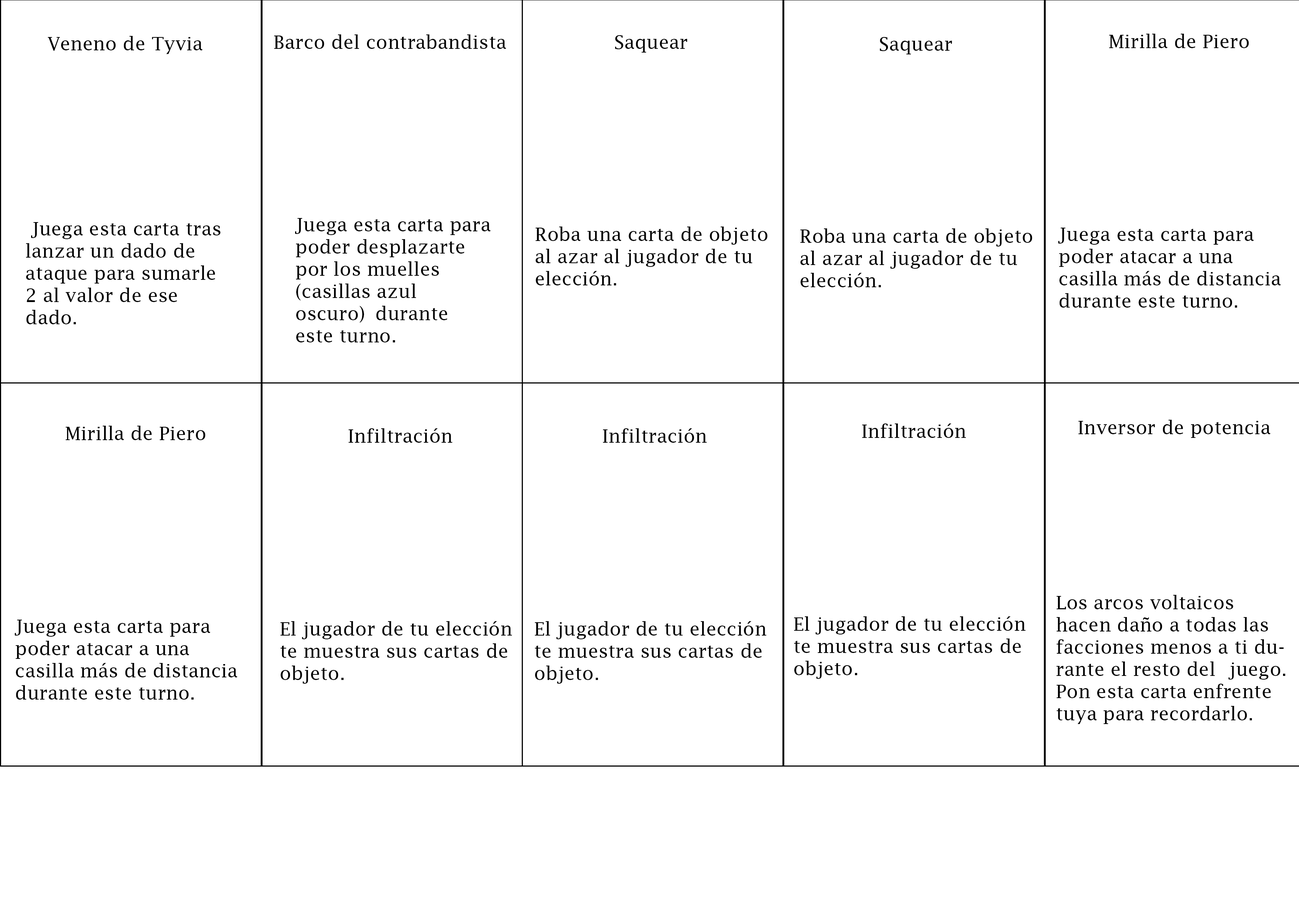
<style>
.page{position:relative;width:1299px;height:918px;background:#ffffff}
.page>*{position:absolute;margin:0}
.t1{font:18.5px "LucidaFax";color:#000000}
</style>
<div class="page">
<p class="t1" style="left:48px;top:36px;width:155px;height:18px">Veneno de Tyvia</p>
<p class="t1" style="left:274px;top:34px;width:232px;height:15px">Barco del contrabandista</p>
<p class="t1" style="left:615px;top:35px;width:72px;height:18px">Saquear</p>
<p class="t1" style="left:880px;top:37px;width:72px;height:17px">Saquear</p>
<p class="t1" style="left:1109px;top:34px;width:140px;height:14px">Mirilla de Piero</p>
<p class="t1" style="left:295px;top:218px;width:196px;height:124px">Juega esta carta para poder desplazarte por los muelles (casillas azul oscuro)  durante este turno.</p>
<p class="t1" style="left:26px;top:222px;width:195px;height:102px">Juega esta carta tras lanzar un dado de ataque para sumarle 2 al valor de ese dado.</p>
<p class="t1" style="left:535px;top:227px;width:232px;height:58px">Roba una carta de objeto al azar al jugador de tu elección.</p>
<p class="t1" style="left:800px;top:228px;width:232px;height:59px">Roba una carta de objeto al azar al jugador de tu elección.</p>
<p class="t1" style="left:1058px;top:228px;width:223px;height:80px">Juega esta carta para poder atacar a una<br>casilla más de distancia durante este turno.</p>
<p class="t1" style="left:66px;top:426px;width:139px;height:14px">Mirilla de Piero</p>
<p class="t1" style="left:862px;top:424px;width:104px;height:14px">Infiltración</p>
<p class="t1" style="left:1078px;top:420px;width:192px;height:18px">Inversor de potencia</p>
<p class="t1" style="left:348px;top:428px;width:104px;height:15px">Infiltración</p>
<p class="t1" style="left:603px;top:428px;width:104px;height:15px">Infiltración</p>
<p class="t1" style="left:1056px;top:595px;width:229px;height:129px">Los arcos voltaicos hacen daño a todas las facciones menos a ti durante el resto del  juego. Pon esta carta enfrente tuya para recordarlo.</p>
<p class="t1" style="left:794px;top:616px;width:232px;height:63px">El jugador de tu elección te muestra sus cartas de objeto.</p>
<p class="t1" style="left:15px;top:620px;width:222px;height:80px">Juega esta carta para poder atacar a una<br>casilla más de distancia durante este turno.</p>
<p class="t1" style="left:280px;top:621px;width:232px;height:63px">El jugador de tu elección te muestra sus cartas de objeto.</p>
<p class="t1" style="left:535px;top:621px;width:231px;height:63px">El jugador de tu elección te muestra sus cartas de objeto.</p>
</div>
